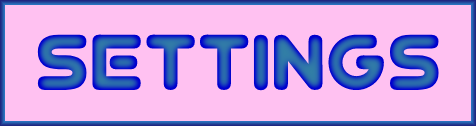
<style>
.page{position:relative;width:476px;height:126px;background:#ffc1f1}
.page>*{position:absolute;margin:0}
.t1{font:88.5px "Virgo01"}
</style>
<div class="page">
<p class="t1" style="left:37px;top:34px;width:402px;height:57px">Settings</p>
</div>
